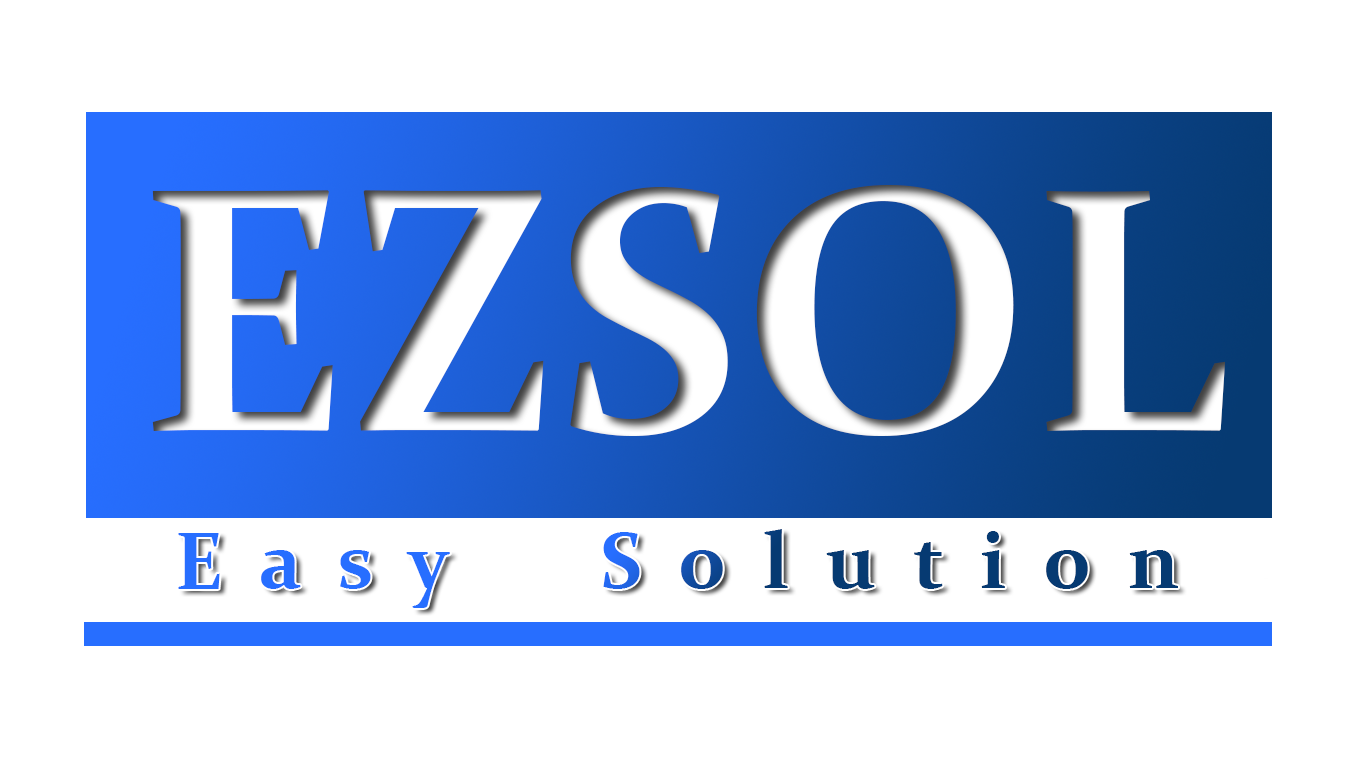
<style>
.page{position:relative;width:1366px;height:768px;background:#ffffff}
.page>*{position:absolute;margin:0}
.t1{font:350px "Constantia-Bold";color:#ffffff}
.t2{font:80px "Constantia-Bold"}
</style>
<div class="page">
<p class="t1" style="left:152px;top:184px;width:1073px;height:252px">EZSOL</p>
<p class="t2" style="left:178px;top:529px;width:1000px;height:79px">E  a  s  y        S  o  l  u  t  i  o  n</p>
</div>
